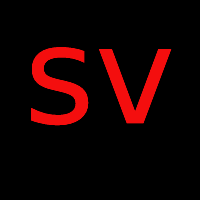
<style>
.page{position:relative;width:200px;height:200px;background:#000000}
.page>*{position:absolute;margin:0}
.t1{font:136px "DejaVuSans";color:#f40e0e}
</style>
<div class="page">
<p class="t1" style="left:31px;top:47px;width:141px;height:79px">sv</p>
</div>
